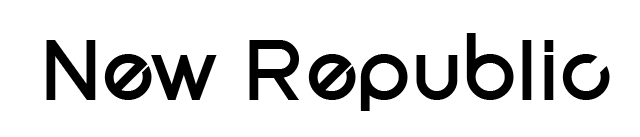
<style>
.page{position:relative;width:640px;height:137px;background:#ffffff}
.page>*{position:absolute;margin:0}
.t1{font:80px "SFNewRepublicBold";color:#000000}
</style>
<div class="page">
<p class="t1" style="left:46px;top:33px;width:564px;height:78px">New Republic</p>
</div>
